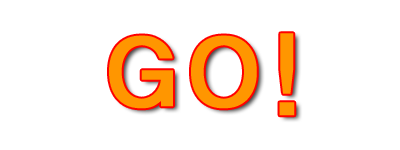
<style>
.page{position:relative;width:400px;height:150px;background:#ffffff}
.page>*{position:absolute;margin:0}
.t1{font:100px "HaanYGodic23";color:#ff9600;font-weight:bold}
</style>
<div class="page">
<p class="t1" style="left:109px;top:33px;width:186px;height:83px">GO!</p>
</div>
